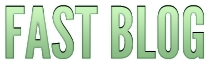
<style>
.page{position:relative;width:210px;height:65px;background:#ffffff}
.page>*{position:absolute;margin:0}
.t1{font:71.3px "LeagueGothic";text-transform:uppercase}
</style>
<div class="page">
<p class="t1" style="left:5px;top:5px;width:199px;height:54px">fast Blog</p>
<p class="t1" style="left:5px;top:5px;width:199px;height:54px">fast Blog</p>
</div>
